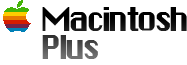
<style>
.page{position:relative;width:187px;height:65px;background:#ffffff}
.page>*{position:absolute;margin:0}
.t1{font:32px/28px "ChicagoFLF";letter-spacing:-0.125em}
</style>
<div class="page">
<p class="t1" style="left:42px;top:7px;width:145px;height:52px">Macintosh<br>Plus</p>
</div>
